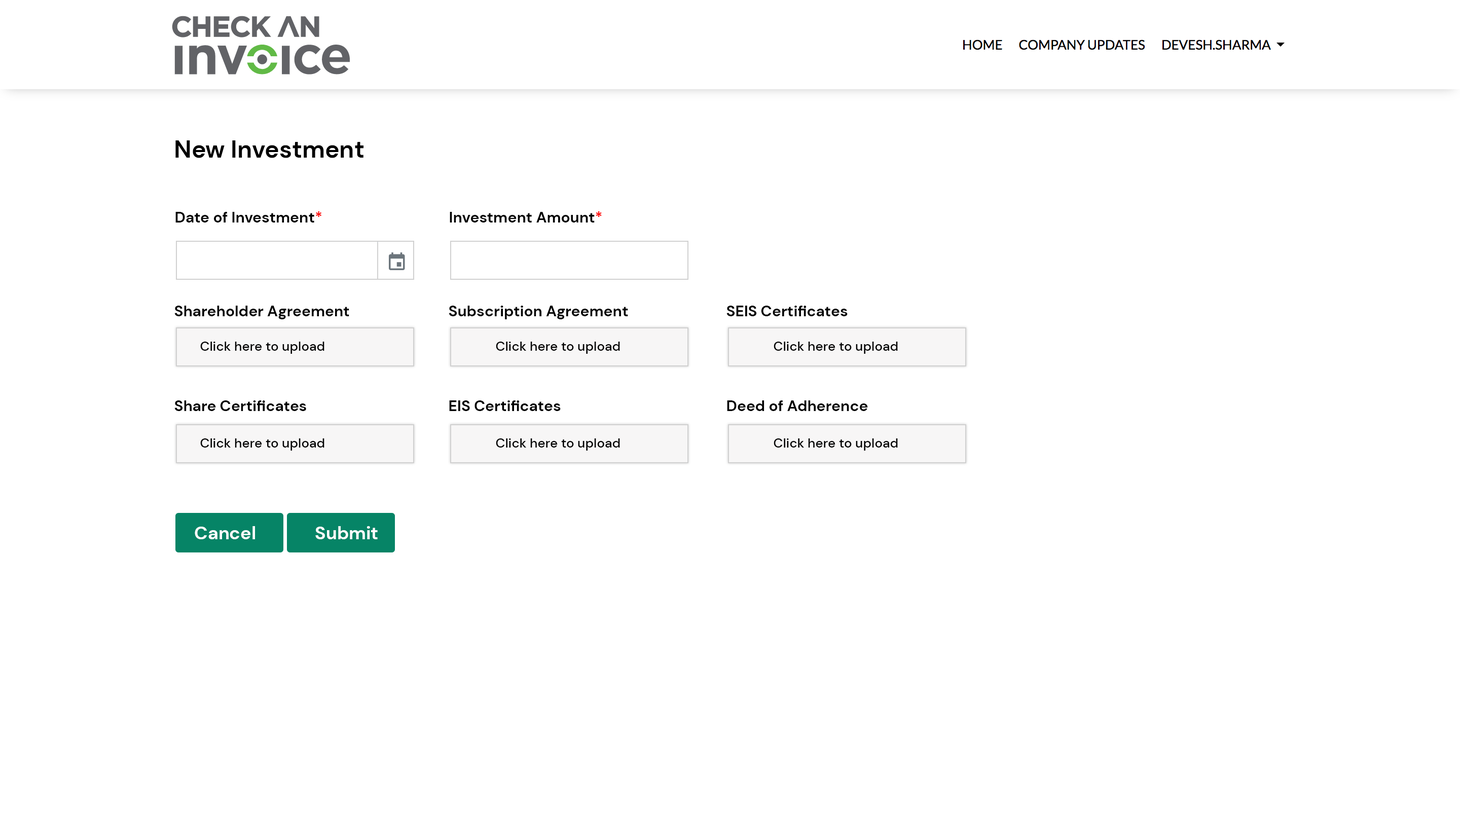
<style>
.page{position:relative;width:1460px;height:816px;background:#ffffff}
.page>*{position:absolute;margin:0}
.t1{font:24.3px "DMSans-Bold";color:#000000}
.t2{font:15.2px "DMSans-Bold";color:#000000}
.t3{font:15.2px "DMSans-Bold";color:#fc0000}
.t4{font:15.2px "DMSans-Bold";color:#fe0000}
.t5{font:13.2px "DMSans-Medium";color:#000000}
.t6{font:18.3px "DMSans-Bold";color:#ffffff}
</style>
<div class="page">
<p class="t1" style="left:175px;top:140px;width:189px;height:18px">New Investment</p>
<p class="t2" style="left:175px;top:211px;width:147px;height:12px">Date of Investment<span class="t3">*</span></p>
<p class="t2" style="left:450px;top:211px;width:152px;height:12px">Investment Amount<span class="t4">*</span></p>
<p class="t2" style="left:174px;top:306px;width:175px;height:13px">Shareholder Agreement</p>
<p class="t2" style="left:449px;top:306px;width:179px;height:13px">Subscription Agreement</p>
<p class="t2" style="left:727px;top:306px;width:121px;height:10px">SEIS Certificates</p>
<p class="t5" style="left:200px;top:342px;width:125px;height:12px">Click here to upload</p>
<p class="t5" style="left:496px;top:342px;width:124px;height:12px">Click here to upload</p>
<p class="t5" style="left:774px;top:342px;width:124px;height:12px">Click here to upload</p>
<p class="t2" style="left:174px;top:401px;width:132px;height:10px">Share Certificates</p>
<p class="t2" style="left:449px;top:401px;width:112px;height:10px">EIS Certificates</p>
<p class="t2" style="left:727px;top:401px;width:141px;height:10px">Deed of Adherence</p>
<p class="t5" style="left:200px;top:439px;width:125px;height:12px">Click here to upload</p>
<p class="t5" style="left:496px;top:439px;width:124px;height:12px">Click here to upload</p>
<p class="t5" style="left:774px;top:439px;width:124px;height:12px">Click here to upload</p>
<p class="t6" style="left:195px;top:526px;width:60px;height:14px">Cancel</p>
<p class="t6" style="left:315px;top:526px;width:63px;height:14px">Submit</p>
</div>
